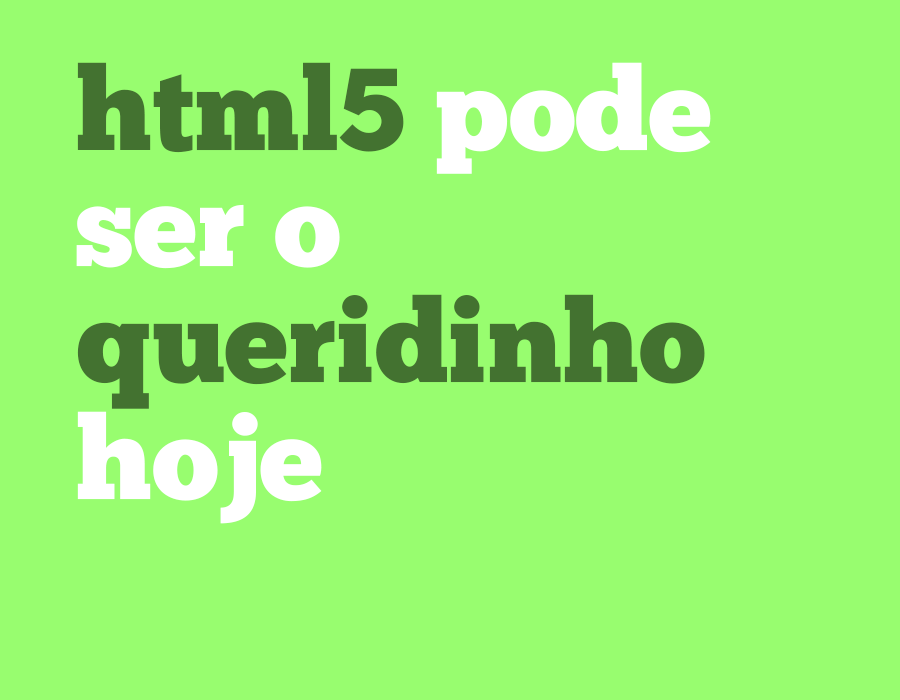
<style>
.page{position:relative;width:900px;height:700px;background:#98fd6f}
.page>*{position:absolute;margin:0}
.t1{font:116.3px/116.3px "ChunkFive-Roman";color:#ffffff}
.t2{font:116.3px/116.3px "ChunkFive-Roman";color:#437230}
</style>
<div class="page">
<p class="t1" style="left:76px;top:62px;width:635px;height:462px"><span class="t2">html5 </span>pode<br>ser o <br><span class="t2">queridinho<br></span>hoje</p>
</div>
